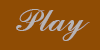
<style>
.page{position:relative;width:100px;height:50px;background:#8f4c04}
.page>*{position:absolute;margin:0}
.t1{font:36px "CommercialScriptBT-Regular";color:#b6b3b5}
</style>
<div class="page">
<p class="t1" style="left:16px;top:9px;width:74px;height:32px">Play</p>
</div>
